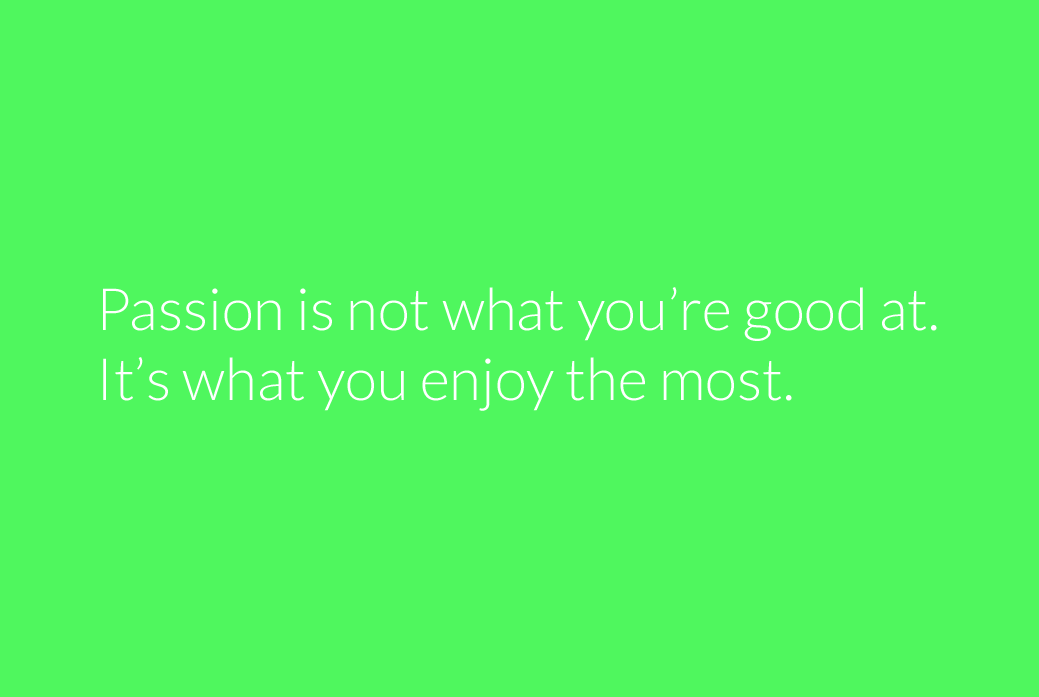
<style>
.page{position:relative;width:1039px;height:697px;background:#4ff75e}
.page>*{position:absolute;margin:0}
.t1{font:58.3px "Lato-Light";color:#ffffff}
</style>
<div class="page">
<p class="t1" style="left:103px;top:287px;width:834px;height:124px">Passion is not what you’re good at.<br>It’s what you enjoy the most.</p>
</div>
